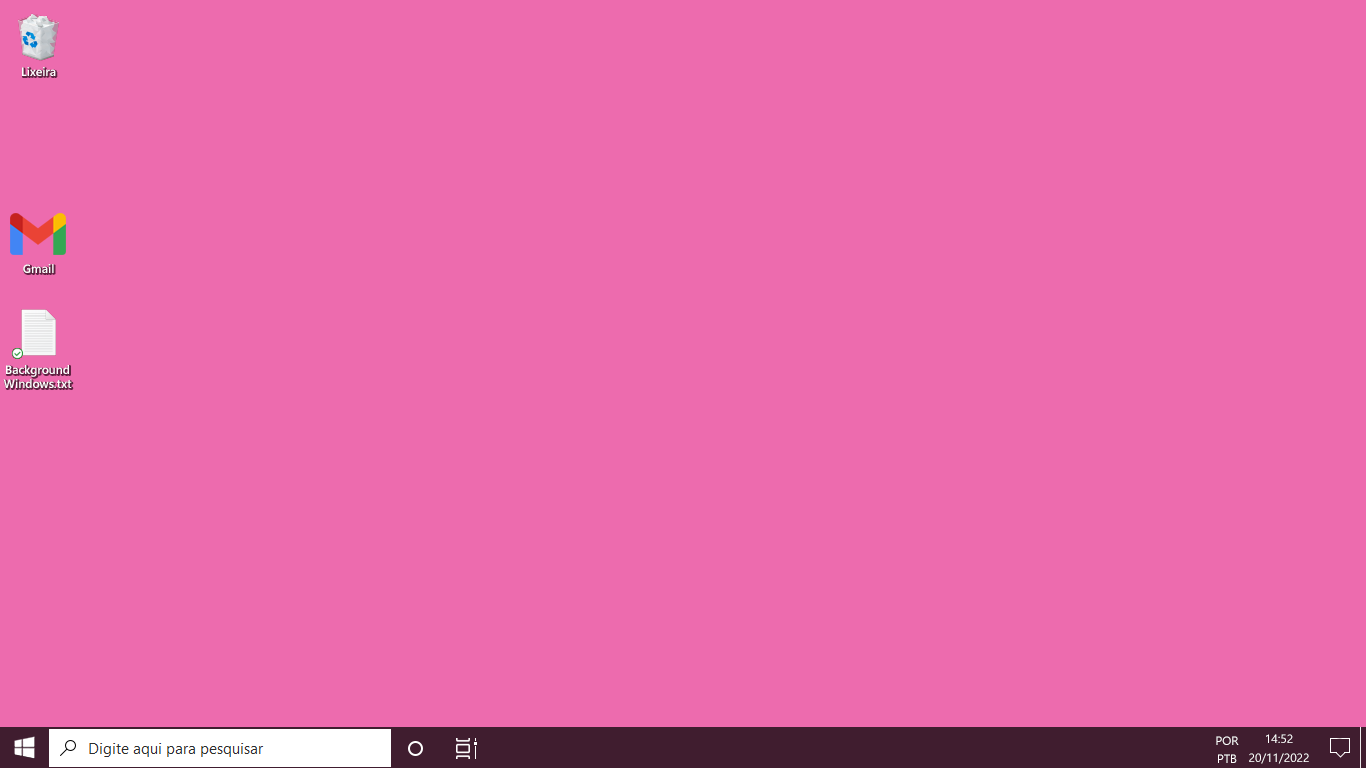
<style>
.page{position:relative;width:1366px;height:768px;background:#ed6bae}
.page>*{position:absolute;margin:0}
.t1{font:12px "SegoeUI-Semibold";color:#ffffff}
.t2{font:12px/18px "SegoeUI";color:#ffffff}
.t3{font:12px "SegoeUI";color:#ffffff}
</style>
<div class="page">
<p class="t1" style="left:22px;top:67px;width:34px;height:9px">Lixeira</p>
<p class="t1" style="left:23px;top:264px;width:31px;height:9px">Gmail</p>
<p class="t1" style="left:3px;top:365px;width:69px;height:23px;text-align:center">Background<br>Windows.txt</p>
<p class="t2" style="left:1216px;top:736px;width:23px;height:27px;text-align:center">POR<br>PTB</p>
<p class="t3" style="left:1266px;top:734px;width:27px;height:9px">14:52</p>
<p class="t3" style="left:1249px;top:753px;width:60px;height:11px">20/11/2022</p>
</div>
